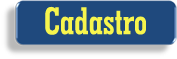
<style>
.page{position:relative;width:177px;height:59px;background:#1f497d}
.page>*{position:absolute;margin:0}
.t1{font:39.1px "GeometricSlab703BT-BoldCond";color:#f7f54d;scale:0.92 1}
</style>
<div class="page">
<p class="t1" style="left:45px;top:6px;width:101px;height:29px">Cadastro</p>
</div>
